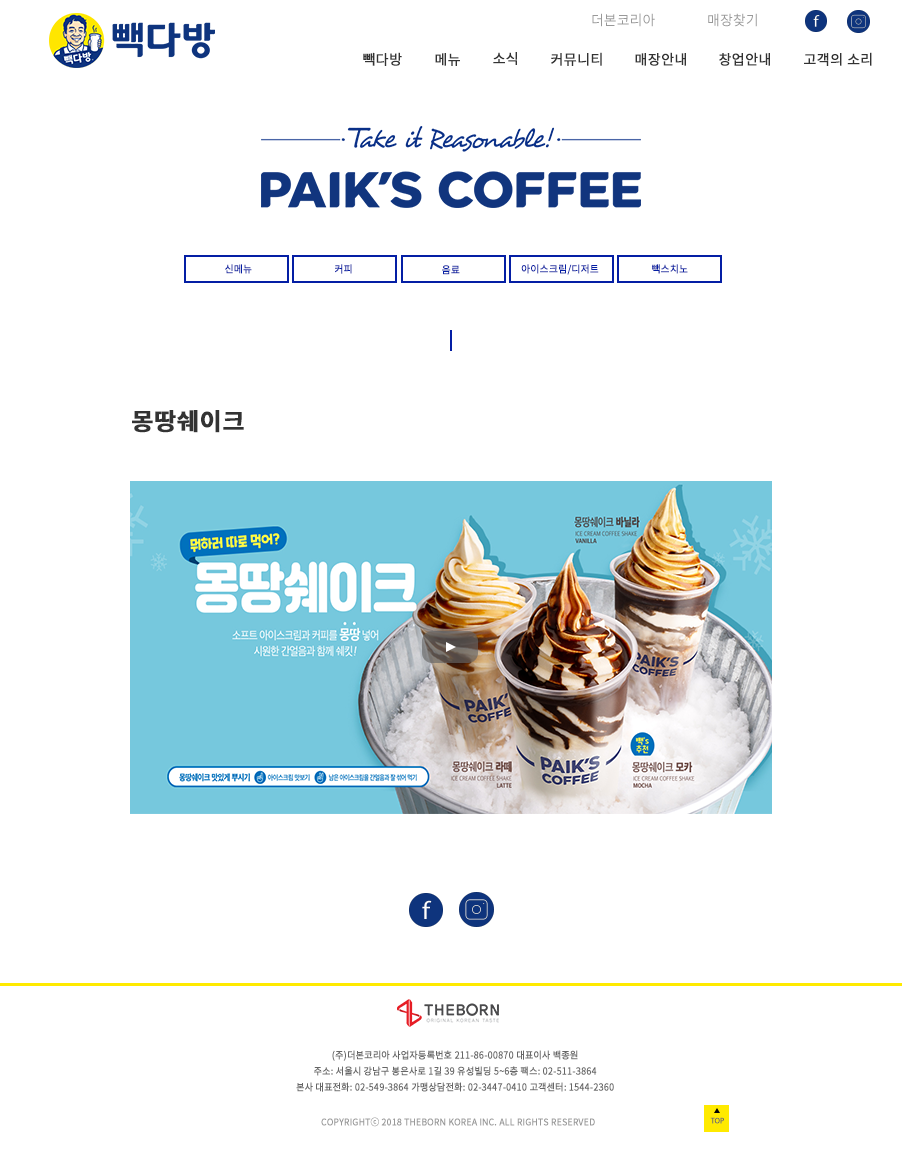
<style>
.page{position:relative;width:902px;height:1151px;background:#ffffff}
.page>*{position:absolute;margin:0}
.t1{font:14px "NotoSansKR-Regular";color:#999999}
.t2{font:14px "NotoSansKR-Regular";color:#333333;font-weight:bold}
.t3{font:9.9px "NotoSansKR-Regular";color:#041ea4;font-weight:bold}
.t4{font:24px "NotoSansKR-Bold";color:#333333;font-weight:bold}
.t5{font:9.6px/16px "NotoSansKR-Regular";color:#666666;font-weight:bold;scale:0.94 1}
.t6{font:9.2px "NotoSansKR-Regular";color:#999999;font-weight:bold;scale:0.94 1}
.t7{font:8.1px "MyriadPro-Regular";color:#666666;font-weight:bold;scale:0.93 1}
</style>
<div class="page">
<p class="t1" style="left:592px;top:13px;width:63px;height:14px">더본코리아</p>
<p class="t1" style="left:708px;top:13px;width:49px;height:14px">매장찾기</p>
<p class="t2" style="left:363px;top:52px;width:39px;height:14px">빽다방</p>
<p class="t2" style="left:435px;top:53px;width:25px;height:13px">메뉴</p>
<p class="t2" style="left:493px;top:52px;width:24px;height:13px">소식</p>
<p class="t2" style="left:551px;top:52px;width:51px;height:14px">커뮤니티</p>
<p class="t2" style="left:635px;top:52px;width:51px;height:14px">매장안내</p>
<p class="t2" style="left:719px;top:52px;width:51px;height:14px">창업안내</p>
<p class="t2" style="left:804px;top:52px;width:68px;height:14px">고객의 소리</p>
<p class="t3" style="left:225px;top:264px;width:27px;height:10px">신메뉴</p>
<p class="t3" style="left:335px;top:264px;width:17px;height:10px">커피</p>
<p class="t3" style="left:442px;top:265px;width:18px;height:10px">음료</p>
<p class="t3" style="left:521px;top:264px;width:78px;height:11px">아이스크림/디저트</p>
<p class="t3" style="left:652px;top:264px;width:36px;height:10px">빽스치노</p>
<p class="t4" style="left:132px;top:410px;width:112px;height:23px">몽땅쉐이크</p>
<p class="t5" style="left:296px;top:1050px;width:318px;height:42px;text-align:center">(주)더본코리아 사업자등록번호 211-86-00870 대표이사 백종원<br>주소: 서울시 강남구 봉은사로 1길 39 유성빌딩 5~6층 팩스: 02-511-3864<br>본사 대표전화: 02-549-3864 가맹상담전화: 02-3447-0410 고객센터: 1544-2360</p>
<p class="t6" style="left:321px;top:1117px;width:274px;height:10px">COPYRIGHTⓒ 2018 THEBORN KOREA INC. ALL RIGHTS RESERVED</p>
<p class="t7" style="left:710px;top:1117px;width:14px;height:7px">TOP</p>
</div>
